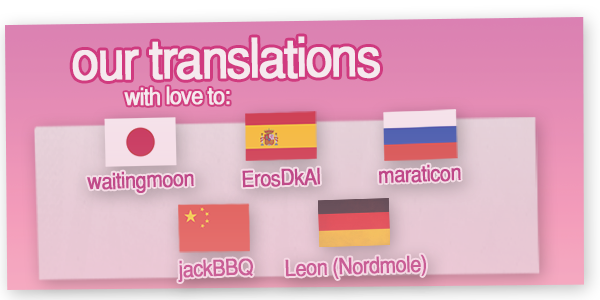
<style>
.page{position:relative;width:600px;height:300px}
.page>*{position:absolute;margin:0}
.t1{font:54px "Helvetica-Normal";letter-spacing:-0.06em;color:#f5e9ee;font-weight:bold;scale:0.9 1}
.t2{font:24px "Helvetica-Normal";letter-spacing:-0.06em;color:#f5e9ee;font-weight:bold;scale:0.9 1}
.t3{font:22px "Helvetica-Normal";letter-spacing:-0.05em;color:#c04a89;font-weight:bold;scale:0.9 1}
.t4{font:22px "Helvetica-Normal";letter-spacing:-0.05em;color:#bf4989;font-weight:bold;scale:0.9 1}
.t5{font:22px "Helvetica-Normal";letter-spacing:-0.05em;color:#bf4888;font-weight:bold;scale:0.9 1}
.t6{font:22px "Helvetica-Normal";letter-spacing:-0.05em;color:#c95d95;font-weight:bold;scale:0.9 1}
.t7{font:22px "Helvetica-Normal";letter-spacing:-0.05em;color:#c95e96;font-weight:bold;scale:0.9 1}
</style>
<div class="page">
<p class="t1" style="left:72px;top:36px;width:308px;height:45px;rotate:-1deg">our translations</p>
<p class="t2" style="left:124px;top:86px;width:106px;height:20px;rotate:-1deg">with love to:</p>
<p class="t3" style="left:87px;top:171px;width:107px;height:22px;rotate:-2deg">waitingmoon</p>
<p class="t4" style="left:242px;top:167px;width:78px;height:21px;rotate:-2deg">ErosDkAl</p>
<p class="t5" style="left:379px;top:164px;width:82px;height:20px;rotate:-2deg">maraticon</p>
<p class="t6" style="left:285px;top:254px;width:141px;height:25px;rotate:-2deg">Leon (Nordmole)</p>
<p class="t7" style="left:178px;top:258px;width:75px;height:24px;rotate:-2deg">jackBBQ</p>
</div>
